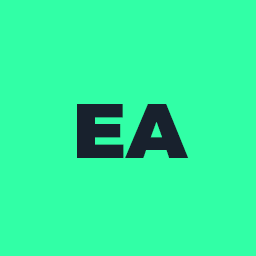
<style>
.page{position:relative;width:256px;height:256px;background:#31ffa6}
.page>*{position:absolute;margin:0}
.t1{font:77.1px "Montserrat-Black";color:#18212d}
</style>
<div class="page">
<p class="t1" style="left:77px;top:104px;width:112px;height:54px">EA</p>
</div>
